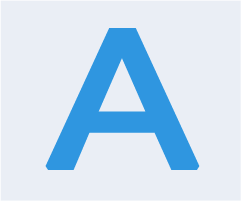
<style>
.page{position:relative;width:241px;height:201px;background:#eaeef5}
.page>*{position:absolute;margin:0}
.t1{font:180.5px "MicrosoftYaHei";color:#2f96e0;font-weight:bold;scale:1.21 1}
.t2{font:180.5px "MicrosoftYaHei";color:#eaeef5;font-weight:bold;scale:1.21 1}
</style>
<div class="page">
<p class="t1" style="left:45px;top:28px;width:155px;height:142px">A<br><span class="t2"><br>、</span></p>
</div>
